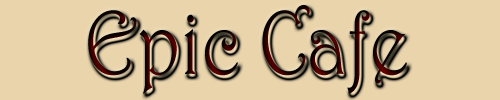
<style>
.page{position:relative;width:500px;height:100px;background:#ead4ab}
.page>*{position:absolute;margin:0}
.t1{font:91.4px "Harrington";scale:0.85 1}
</style>
<div class="page">
<p class="t1" style="left:88px;top:5px;width:319px;height:89px">Epic Cafe</p>
</div>
